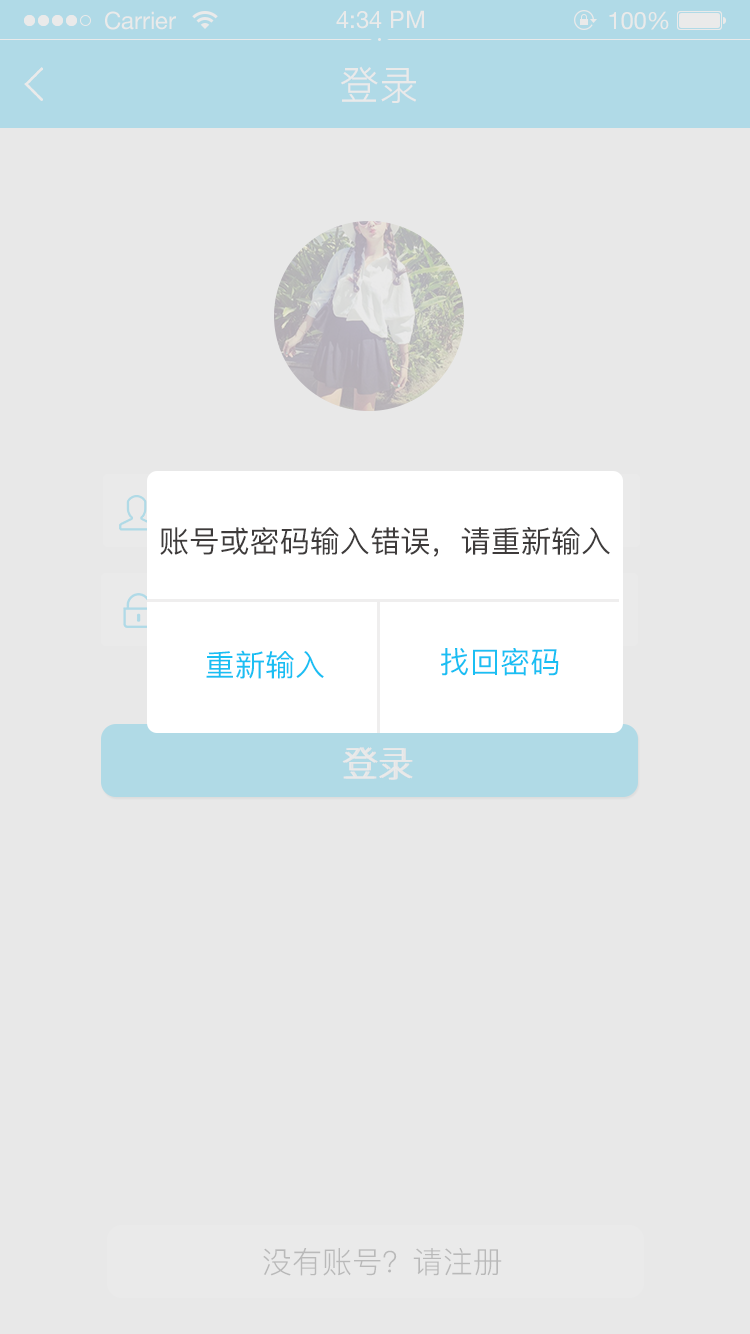
<style>
.page{position:relative;width:750px;height:1334px;background:#e8e8e8}
.page>*{position:absolute;margin:0}
.t1{font:40px "PingFang-SC-Regular";color:#ffffff}
.t2{font:30px "PingFang-SC-Medium";letter-spacing:0.005em;color:#3e3b3b}
.t3{font:30px "PingFang-SC-Medium";letter-spacing:0.005em;color:#19bff3}
.t4{font:36px "PingFang-SC-Regular";color:#ffffff}
.t5{font:36px "PingFang-SC-Regular";color:#f2f1f1}
.t6{font:30px "PingFang-SC-Regular";letter-spacing:0.005em;color:#b9b9b9}
</style>
<div class="page">
<p class="t1" style="left:341px;top:66px;width:75px;height:37px">登录</p>
<p class="t2" style="left:160px;top:527px;width:450px;height:30px">账号或密码输入错误，请重新输入</p>
<p class="t3" style="left:206px;top:650px;width:118px;height:29px">重新输入</p>
<p class="t3" style="left:441px;top:648px;width:118px;height:28px">找回密码</p>
<p class="t4" style="left:342px;top:747px;width:69px;height:33px">登录</p>
<p class="t5" style="left:344px;top:747px;width:69px;height:33px">登录</p>
<p class="t6" style="left:263px;top:1248px;width:239px;height:28px">没有账号？请注册</p>
</div>
